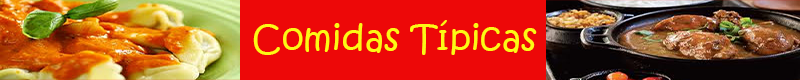
<style>
.page{position:relative;width:800px;height:80px;background:#ed0808}
.page>*{position:absolute;margin:0}
.t1{font:35.2px "KristenITC-Regular";color:#fcf915}
</style>
<div class="page">
<p class="t1" style="left:253px;top:20px;width:284px;height:35px">Comidas Típicas</p>
</div>
